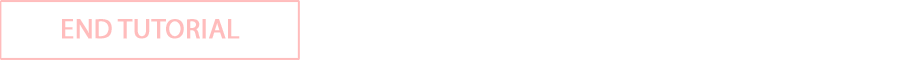
<style>
.page{position:relative;width:900px;height:60px;background:#ffffff}
.page>*{position:absolute;margin:0}
.t1{font:27.8px "MyriadPro-Regular";color:#ffbcbc;font-weight:bold}
</style>
<div class="page">
<p class="t1" style="left:62px;top:19px;width:178px;height:20px">END TUTORIAL</p>
</div>
